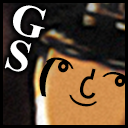
<style>
.page{position:relative;width:128px;height:128px}
.page>*{position:absolute;margin:0}
.t1{font:44.6px/36.5px "TimesNewRomanPS-BoldMT";color:#ffffff;font-variant:small-caps}
</style>
<div class="page">
<p class="t1" style="left:4px;top:5px;width:42px;height:67px;text-align:center;rotate:16deg">G<br>S</p>
</div>
